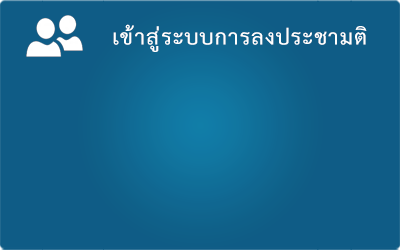
<style>
.page{position:relative;width:400px;height:250px;background:#0f5c86}
.page>*{position:absolute;margin:0}
.t1{font:30px "THSarabunNew-Bold";letter-spacing:0.025em;color:#ffffff;scale:1.07 1}
</style>
<div class="page">
<p class="t1" style="left:113px;top:24px;width:254px;height:28px">เข้าสู่ระบบการลงประชามติ</p>
</div>
